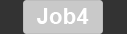
<style>
.page{position:relative;width:127px;height:34px;background:#c9c9c9}
.page>*{position:absolute;margin:0}
.t1{font:22.1px "Arial-BoldMT";color:#ffffff}
</style>
<div class="page">
<p class="t1" style="left:37px;top:8px;width:52px;height:16px">Job4</p>
</div>
